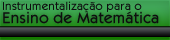
<style>
.page{position:relative;width:170px;height:40px}
.page>*{position:absolute;margin:0}
.t1{font:12px "KabobRegular";color:#0e0e0f}
.t2{font:16px "KabobRegular";color:#0e0e0f}
</style>
<div class="page">
<p class="t1" style="left:3px;top:1px;width:139px;height:12px">Instrumentalização para o</p>
<p class="t2" style="left:3px;top:11px;width:156px;height:13px">Ensino de Matemática</p>
</div>
